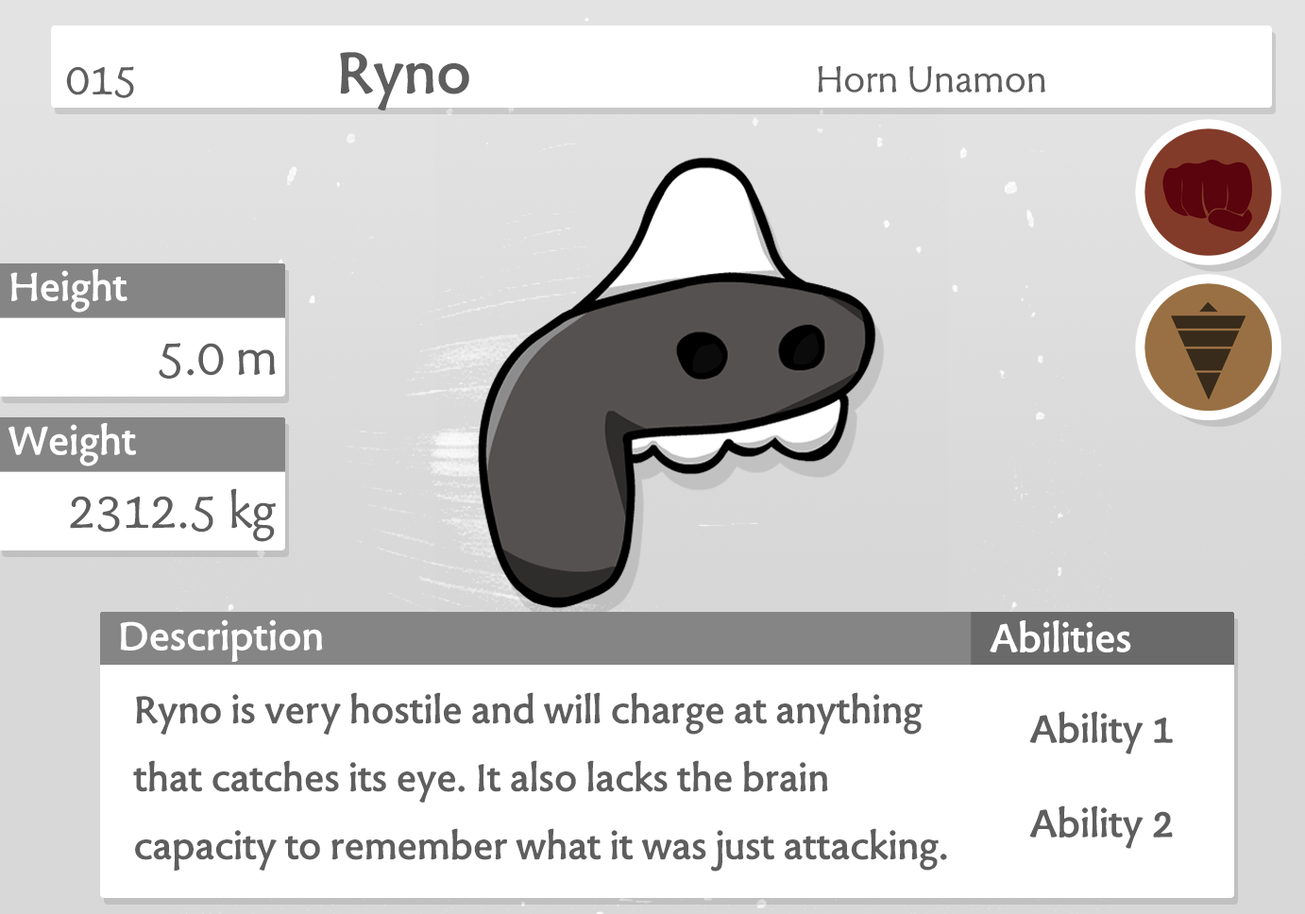
<style>
.page{position:relative;width:1305px;height:914px;background:#ffffff}
.page>*{position:absolute;margin:0}
.t1{font:68px "TuffW01-Bold";color:#605667}
.t2{font:49.5px "TuffW01-Normal";color:#605965}
.t3{font:42.8px "TuffW01-Normal";color:#605667}
.t4{font:46.3px "TuffW01-Bold";color:#ffffff}
.t5{font:56.7px "TuffW01-Normal";color:#605667}
.t6{font:44.6px/68px "TuffW01-Bold";color:#605667}
.t7{font:45.3px/94.4px "TuffW01-Bold";color:#605667}
</style>
<div class="page">
<p class="t1" style="left:340px;top:52px;width:129px;height:58px">Ryno</p>
<p class="t2" style="left:66px;top:66px;width:68px;height:32px">015</p>
<p class="t3" style="left:818px;top:66px;width:227px;height:27px">Horn Unamon</p>
<p class="t4" style="left:10px;top:269px;width:117px;height:44px">Height</p>
<p class="t5" style="left:159px;top:343px;width:117px;height:36px">5.0 m</p>
<p class="t4" style="left:8px;top:423px;width:128px;height:43px">Weight</p>
<p class="t5" style="left:70px;top:488px;width:206px;height:54px">2312.5 kg</p>
<p class="t4" style="left:120px;top:619px;width:203px;height:43px">Description</p>
<p class="t4" style="left:989px;top:620px;width:142px;height:32px">Abilities</p>
<p class="t6" style="left:133px;top:692px;width:814px;height:179px">Ryno is very hostile and will charge at anything<br>that catches its eye. It also lacks the brain<br>capacity to remember what it was just attacking.</p>
<p class="t7" style="left:1029px;top:711px;width:144px;height:138px;text-align:center">Ability 1<br>Ability 2</p>
</div>
